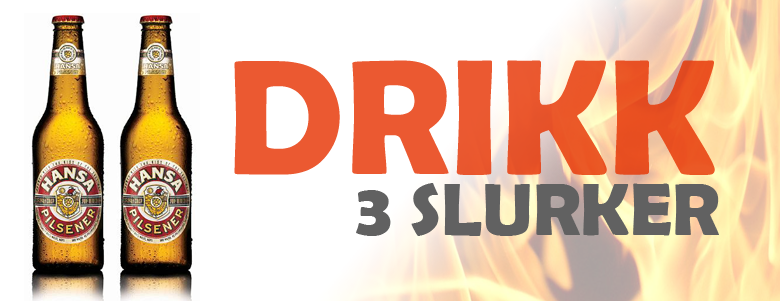
<style>
.page{position:relative;width:780px;height:301px;background:#ffffff}
.page>*{position:absolute;margin:0}
.t1{font:165.1px "BerlinSansFBDemi-Bold";color:#eb5931}
.t2{font:74.9px "BerlinSansFBDemi-Bold";color:#616161}
</style>
<div class="page">
<p class="t1" style="left:234px;top:60px;width:481px;height:115px">DRIKK</p>
<p class="t2" style="left:356px;top:183px;width:363px;height:53px">3 SLURKER</p>
</div>
